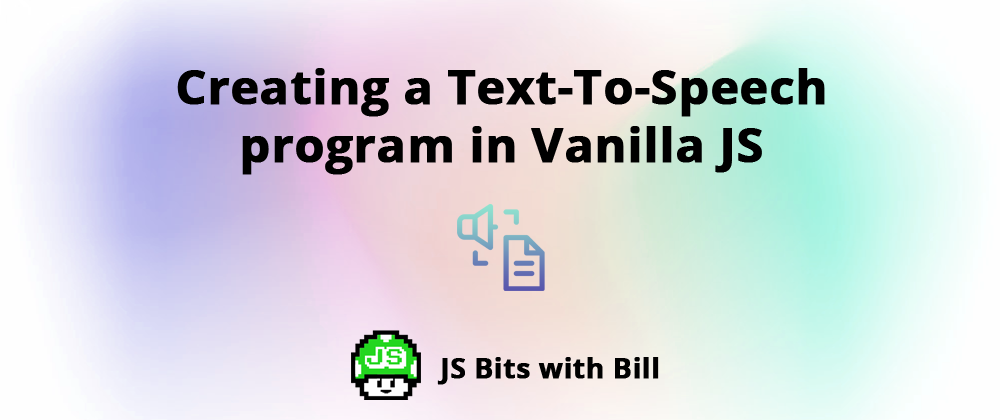
<style>
.page{position:relative;width:1000px;height:420px}
.page>*{position:absolute;margin:0}
.t1{font:48px/58px "OpenSans-Bold";color:#000000;font-weight:bold}
.t2{font:28px "OpenSans-Bold";color:#000000;font-weight:bold}
</style>
<div class="page">
<p class="t1" style="left:177px;top:68px;width:648px;height:107px;text-align:center">Creating a Text-To-Speech<br>program in Vanilla JS</p>
<p class="t2" style="left:437px;top:357px;width:222px;height:28px">JS Bits with Bill</p>
</div>
